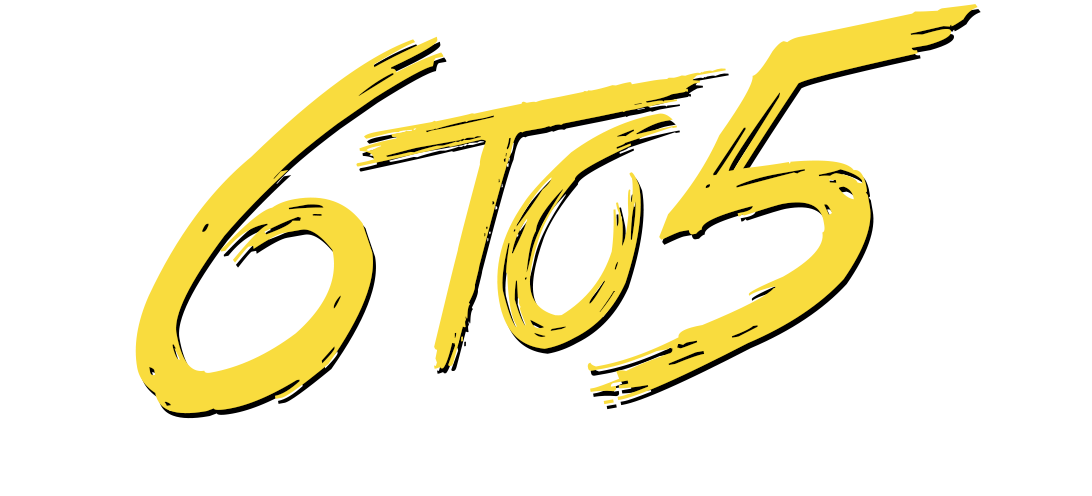
<style>
.page{position:relative;width:1092px;height:496px;background:#ffffff}
.page>*{position:absolute;margin:0}
.t1{font:300px "TrueLies";color:#f9dc3e}
.t2{font:320px "TrueLies";color:#f9dc3e}
</style>
<div class="page">
<p class="t1" style="left:356px;top:4px;width:622px;height:401px;rotate:-10deg">to<span class="t2">5</span></p>
<p class="t2" style="left:135px;top:36px;width:309px;height:378px;rotate:-10deg">6</p>
</div>
